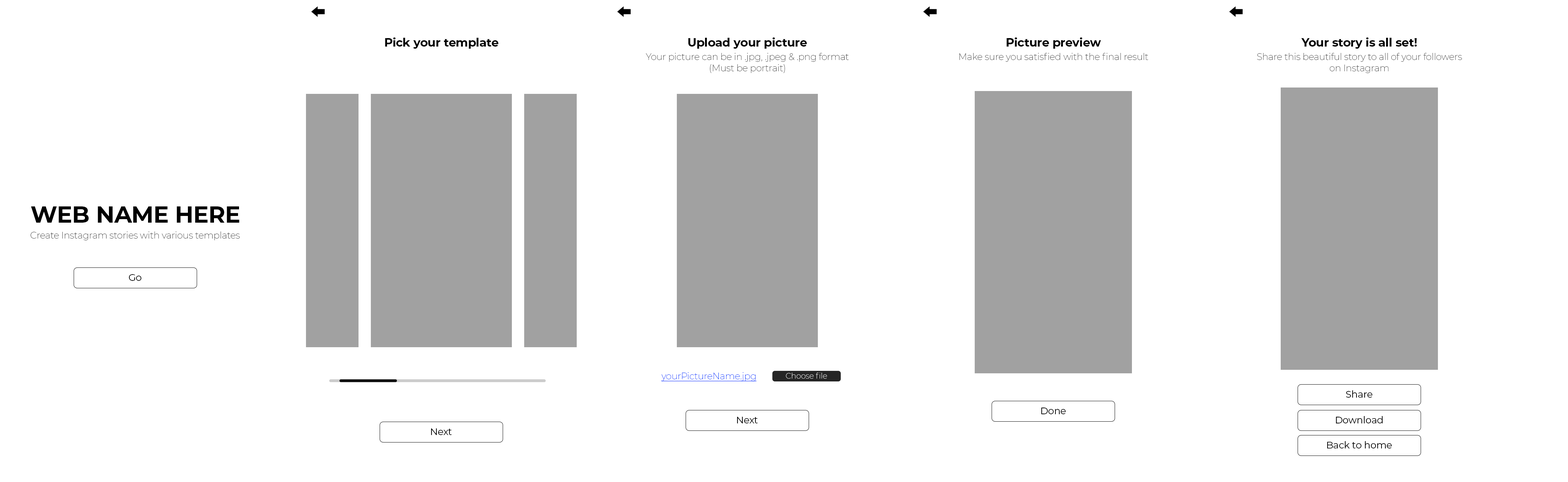
<style>
.page{position:relative;width:1568px;height:482px;background:#ffffff}
.page>*{position:absolute;margin:0}
.t1{font:11.7px "Montserrat-Bold";letter-spacing:-0.01em;color:#000000}
.t2{font:9.2px "Montserrat-ExtraLight";letter-spacing:-0.01em;color:#3a3a3a}
.t3{font:23.1px "Montserrat-Bold";letter-spacing:-0.01em;color:#000000;text-transform:uppercase}
.t4{font:9.2px "Montserrat-ExtraLight";letter-spacing:-0.01em;color:#333333}
.t5{font:9.2px "Montserrat-ExtraLight";letter-spacing:-0.01em;color:#333333;text-transform:uppercase}
.t6{font:9.6px "Montserrat-Regular";letter-spacing:-0.01em;color:#000000}
.t7{font:9.2px "Montserrat-ExtraLight";letter-spacing:-0.01em;color:#0036ff;text-decoration:underline}
.t8{font:7.9px "Montserrat-ExtraLight";letter-spacing:-0.01em;color:#ffffff}
</style>
<div class="page">
<p class="t1" style="left:385px;top:37px;width:113px;height:12px">Pick your template</p>
<p class="t1" style="left:688px;top:37px;width:119px;height:12px">Upload your picture</p>
<p class="t1" style="left:1006px;top:37px;width:95px;height:12px">Picture preview</p>
<p class="t1" style="left:1301px;top:37px;width:116px;height:12px">Your story is all set!</p>
<p class="t2" style="left:646px;top:53px;width:203px;height:20px;text-align:center">Your picture can be in .jpg, .jpeg &amp; .png format<br>(Must be portrait)</p>
<p class="t2" style="left:959px;top:53px;width:189px;height:9px">Make sure you satisfied with the final result</p>
<p class="t2" style="left:1257px;top:53px;width:205px;height:20px;text-align:center">Share this beautiful story to all of your followers<br>on Instagram</p>
<p class="t3" style="left:31px;top:206px;width:208px;height:16px">WEB NAME HERE</p>
<p class="t4" style="left:30px;top:231px;width:210px;height:9px"><span class="t5">C</span>reate Instagram stories with various templates</p>
<p class="t6" style="left:129px;top:274px;width:12px;height:7px">Go</p>
<p class="t7" style="left:661px;top:372px;width:96px;height:9px">yourPictureName.jpg</p>
<p class="t8" style="left:786px;top:372px;width:41px;height:6px">Choose file</p>
<p class="t6" style="left:1346px;top:390px;width:26px;height:7px">Share</p>
<p class="t6" style="left:1041px;top:407px;width:25px;height:7px">Done</p>
<p class="t6" style="left:737px;top:416px;width:21px;height:7px">Next</p>
<p class="t6" style="left:1336px;top:416px;width:47px;height:7px">Download</p>
<p class="t6" style="left:431px;top:428px;width:21px;height:7px">Next</p>
<p class="t6" style="left:1327px;top:441px;width:65px;height:7px">Back to home</p>
</div>
